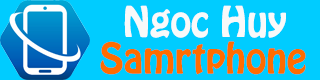
<style>
.page{position:relative;width:320px;height:80px;background:#00ccff}
.page>*{position:absolute;margin:0}
.t1{font:37.5px "HoboStd";color:#f9f9f9}
.t2{font:37.5px "HoboStd";color:#ff6c00}
</style>
<div class="page">
<p class="t1" style="left:124px;top:5px;width:162px;height:33px">Ngoc Huy</p>
<p class="t2" style="left:100px;top:41px;width:206px;height:34px">Samrtphone</p>
</div>
